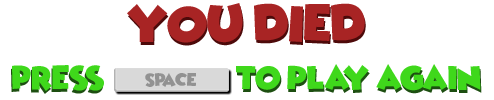
<style>
.page{position:relative;width:494px;height:100px;background:#ffffff}
.page>*{position:absolute;margin:0}
.t1{font:15.6px "WickedMouse";color:#a82424}
.t2{font:27.8px "WickedMouse";color:#3fd81b}
.t3{font:27.8px "WickedMouse"}
</style>
<div class="page">
<p class="t1" style="left:127px;top:3px;width:238px;height:40px">YOU DIED</p>
<p class="t1" style="left:128px;top:6px;width:238px;height:40px">YOU DIED</p>
<p class="t2" style="left:12px;top:65px;width:92px;height:26px">Press</p>
<p class="t2" style="left:236px;top:64px;width:245px;height:27px">To play again</p>
<p class="t3" style="left:11px;top:68px;width:92px;height:26px">Press</p>
<p class="t2" style="left:237px;top:67px;width:245px;height:27px">To play again</p>
</div>
